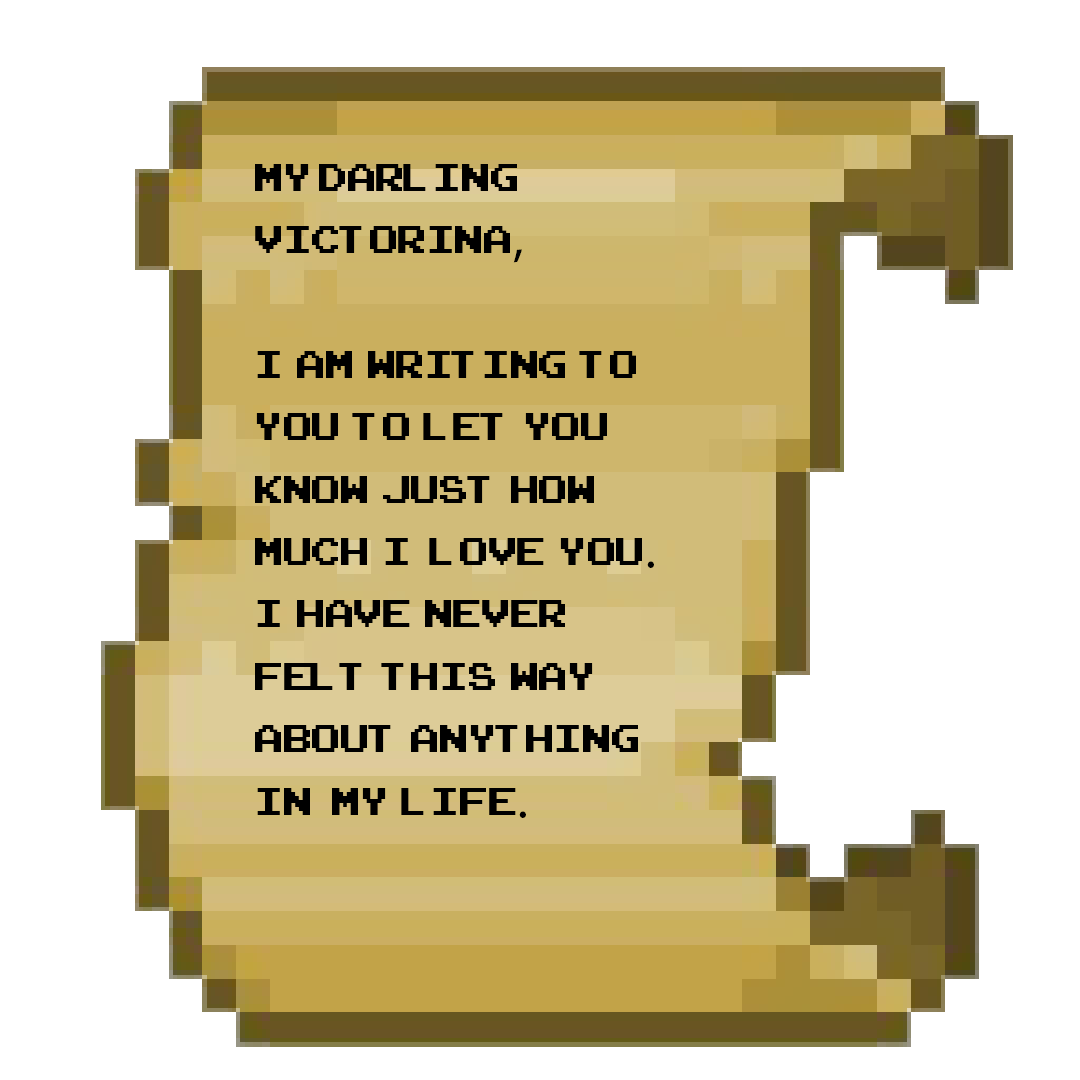
<style>
.page{position:relative;width:1080px;height:1080px;background:#ffffff}
.page>*{position:absolute;margin:0}
.t1{font:52px "ArcadeClassic";color:#000000}
.t2{font:52px "MyriadPro-Regular";color:#000000}
</style>
<div class="page">
<p class="t1" style="left:255px;top:164px;width:399px;height:654px">MY Darling Victorina<span class="t2">,<br></span><br>I  am  writing  to you  TO  LEt  YOU  KNOW  JUST  HOW  MUCH  I   LOVE  YOU<span class="t2">. <br></span>I  have  never  felt  this  way  about  anything  in   my  life<span class="t2">.</span></p>
</div>
